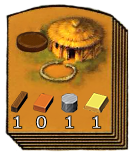
<style>
.page{position:relative;width:131px;height:157px}
.page>*{position:absolute;margin:0}
.t1{font:18px "Verdana-Bold";text-transform:uppercase}
</style>
<div class="page">
<p class="t1" style="left:13px;top:115px;width:10px;height:14px">1</p>
<p class="t1" style="left:35px;top:115px;width:12px;height:14px">0</p>
<p class="t1" style="left:65px;top:115px;width:10px;height:14px">1</p>
<p class="t1" style="left:92px;top:115px;width:10px;height:14px">1</p>
</div>
